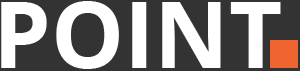
<style>
.page{position:relative;width:300px;height:71px;background:#333333}
.page>*{position:absolute;margin:0}
.t1{font:92px "OpenSans-Bold";color:#ffffff}
</style>
<div class="page">
<p class="t1" style="left:1px;top:1px;width:280px;height:68px">POINT</p>
</div>
